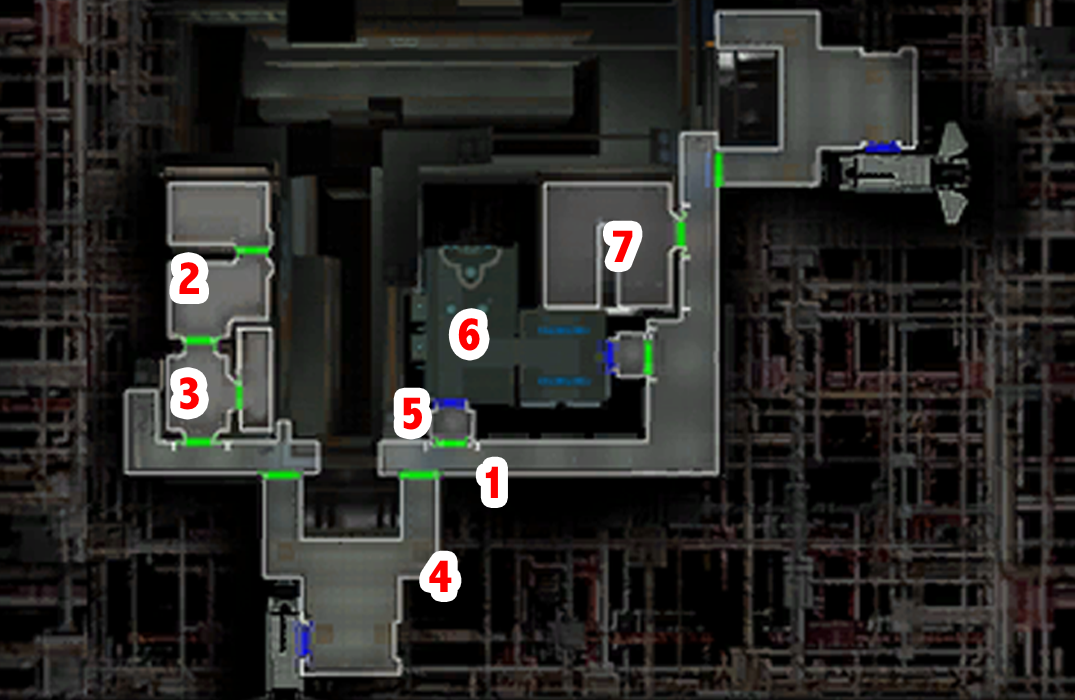
<style>
.page{position:relative;width:1075px;height:700px}
.page>*{position:absolute;margin:0}
.t1{font:48px "AbadiMT-CondensedExtraBold";color:#ff0000}
</style>
<div class="page">
<p class="t1" style="left:613px;top:230px;width:20px;height:32px">7</p>
<p class="t1" style="left:179px;top:262px;width:20px;height:32px">2</p>
<p class="t1" style="left:458px;top:318px;width:22px;height:33px">6</p>
<p class="t1" style="left:180px;top:377px;width:19px;height:33px">3</p>
<p class="t1" style="left:403px;top:397px;width:19px;height:33px">5</p>
<p class="t1" style="left:485px;top:466px;width:13px;height:32px">1</p>
<p class="t1" style="left:429px;top:560px;width:23px;height:32px">4</p>
</div>
